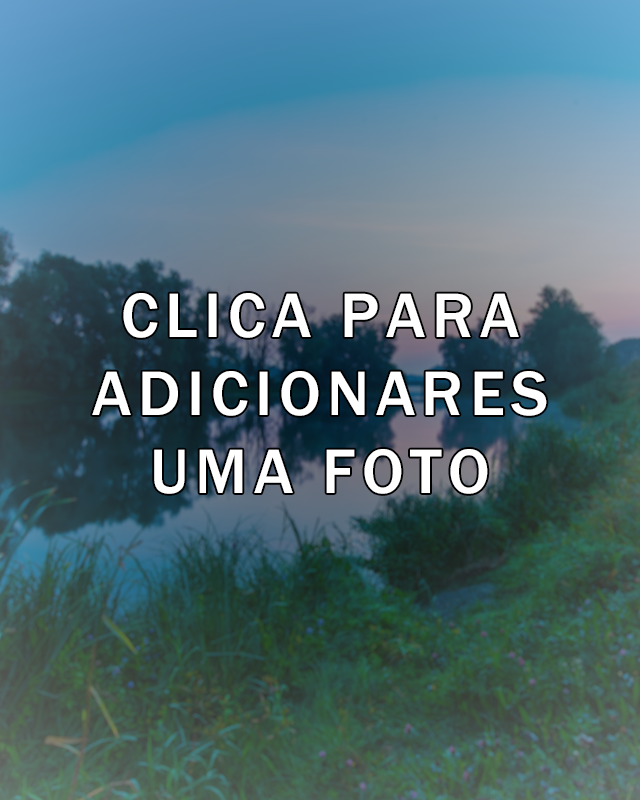
<style>
.page{position:relative;width:640px;height:800px}
.page>*{position:absolute;margin:0}
.t1{font:65px "FranklinGothic-Medium";letter-spacing:0.1em;color:#ffffff}
</style>
<div class="page">
<p class="t1" style="left:92px;top:293px;width:455px;height:201px;text-align:center">CLICA PARA ADICIONARES UMA FOTO</p>
</div>
